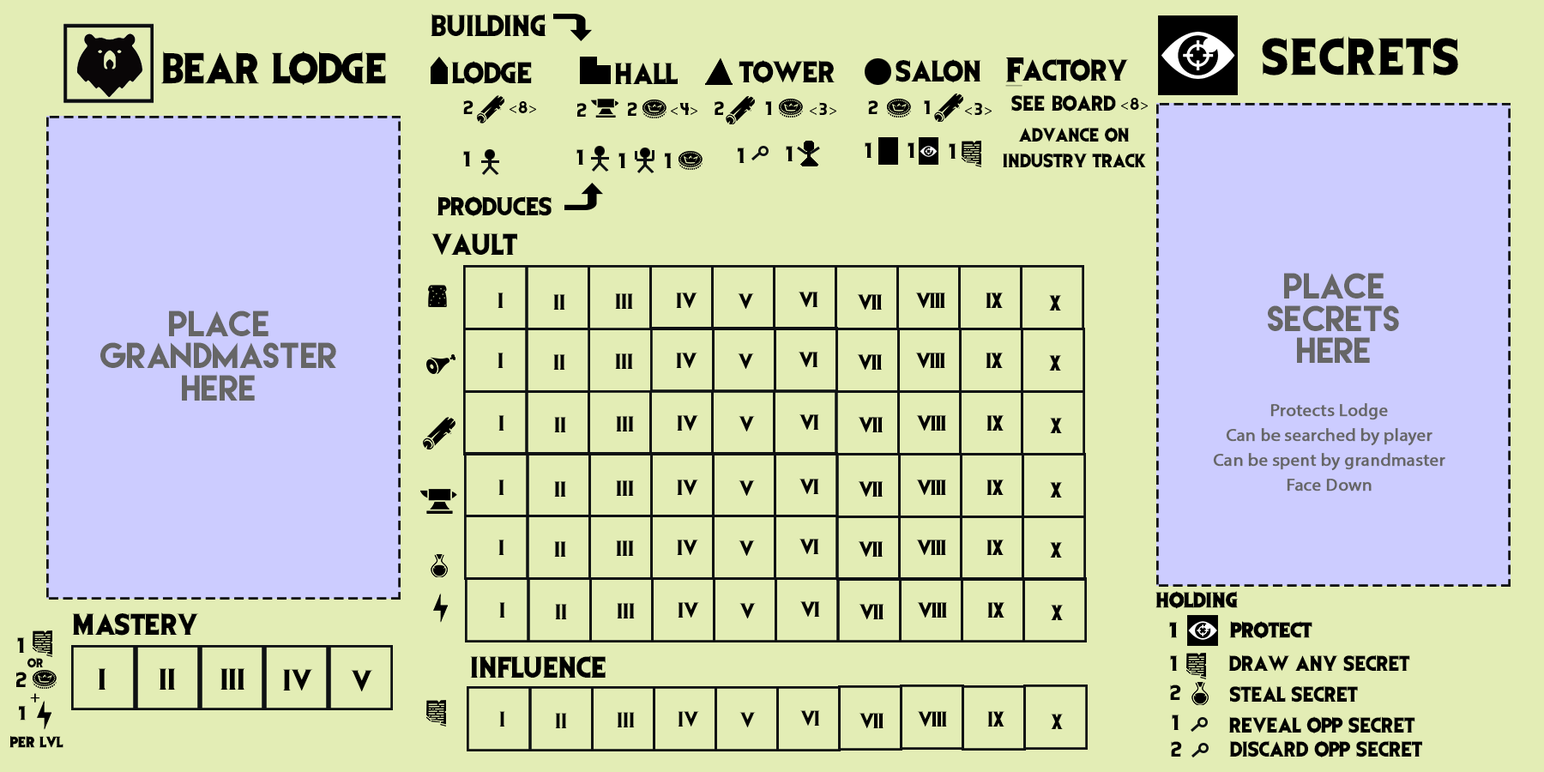
<style>
.page{position:relative;width:1544px;height:772px;background:#e3edb5}
.page>*{position:absolute;margin:0}
.t1{font:25px "EvilDead";color:#000000}
.t2{font:42.9px "EvilDead";letter-spacing:0.05em;color:#000000}
.t3{font:35.7px "EvilDead";color:#000000}
.t4{font:28.6px "EvilDead";color:#000000;font-weight:bold;text-decoration:underline}
.t5{font:16.1px "EvilDead";color:#000000}
.t6{font:14.3px "MyriadPro-Regular";color:#000000}
.t7{font:14.3px "EvilDead";color:#000000}
.t8{font:17.9px "EvilDead";color:#000000}
.t9{font:16.1px/25px "EvilDead";color:#000000}
.t10{font:21.4px "EvilDead";color:#000000}
.t11{font:32.2px/32.2px "LemonMilk";color:#666666}
.t12{font:17.9px/25px "MyriadPro-Regular";color:#666666;font-weight:bold}
.t13{font:17.9px "EvilDead";color:#000000;font-weight:bold}
.t14{font:10.7px "EvilDead";color:#000000}
.t15{font:16.1px "MyriadPro-Regular";color:#000000;font-weight:bold}
.t16{font:16.1px "EvilDead";color:#000000;font-weight:bold}
.t17{font:17.9px "EvilDead";letter-spacing:-0.05em;color:#000000}
.t18{font:12.5px "EvilDead";color:#000000;font-weight:bold}
</style>
<div class="page">
<p class="t1" style="left:431px;top:14px;width:116px;height:22px">BUILDING</p>
<p class="t2" style="left:1262px;top:36px;width:197px;height:39px">SECRETS</p>
<p class="t3" style="left:161px;top:51px;width:225px;height:34px">BEAR LODGE</p>
<p class="t1" style="left:451px;top:61px;width:81px;height:24px">LODGE</p>
<p class="t1" style="left:614px;top:63px;width:64px;height:21px">HALL</p>
<p class="t1" style="left:739px;top:60px;width:97px;height:24px">Tower</p>
<p class="t1" style="left:896px;top:59px;width:85px;height:24px">SALON</p>
<p class="t4" style="left:1006px;top:57px;width:18px;height:30px">F</p>
<p class="t1" style="left:1022px;top:58px;width:107px;height:24px">ACTORY</p>
<p class="t5" style="left:463px;top:100px;width:11px;height:14px">2</p>
<p class="t6" style="left:510px;top:101px;width:26px;height:12px">&lt;<span class="t7">8</span>&gt;</p>
<p class="t5" style="left:715px;top:101px;width:9px;height:14px">2</p>
<p class="t5" style="left:765px;top:101px;width:7px;height:14px">1</p>
<p class="t5" style="left:868px;top:100px;width:11px;height:14px">2</p>
<p class="t5" style="left:924px;top:100px;width:7px;height:14px">1</p>
<p class="t8" style="left:1012px;top:94px;width:104px;height:18px">SEE BOARD</p>
<p class="t6" style="left:1121px;top:98px;width:27px;height:12px">&lt;<span class="t7">8</span>&gt;</p>
<p class="t5" style="left:577px;top:103px;width:10px;height:14px">2</p>
<p class="t5" style="left:628px;top:102px;width:9px;height:14px">2</p>
<p class="t6" style="left:671px;top:103px;width:27px;height:12px">&lt;<span class="t7">4</span>&gt;</p>
<p class="t6" style="left:810px;top:102px;width:26px;height:13px">&lt;<span class="t7">3</span>&gt;</p>
<p class="t6" style="left:965px;top:102px;width:27px;height:13px">&lt;<span class="t7">3</span>&gt;</p>
<p class="t9" style="left:1003px;top:127px;width:143px;height:41px;text-align:center">AdVANCE ON<br>INDUSTRY TRACK</p>
<p class="t8" style="left:577px;top:149px;width:7px;height:16px">1</p>
<p class="t8" style="left:738px;top:148px;width:7px;height:15px">1</p>
<p class="t8" style="left:786px;top:146px;width:8px;height:15px">1</p>
<p class="t8" style="left:865px;top:142px;width:8px;height:16px">1</p>
<p class="t8" style="left:908px;top:142px;width:7px;height:16px">1</p>
<p class="t8" style="left:949px;top:143px;width:8px;height:16px">1</p>
<p class="t8" style="left:463px;top:151px;width:8px;height:15px">1</p>
<p class="t8" style="left:619px;top:153px;width:7px;height:15px">1</p>
<p class="t8" style="left:665px;top:153px;width:7px;height:15px">1</p>
<p class="t10" style="left:437px;top:196px;width:115px;height:21px">PRODUCES</p>
<p class="t1" style="left:431px;top:233px;width:86px;height:22px">VAULT</p>
<p class="t11" style="left:1268px;top:273px;width:131px;height:90px;text-align:center">PLACE<br>SECRETS<br>HERE</p>
<p class="t11" style="left:100px;top:311px;width:236px;height:90px;text-align:center">PLACE<br>GRANDMASTER<br>HERE</p>
<p class="t12" style="left:1213px;top:403px;width:233px;height:89px;text-align:center">Protects Lodge<br>Can be searched by player<br>Can be spent by grandmaster<br>Face Down</p>
<p class="t13" style="left:1156px;top:591px;width:82px;height:18px">HOLDING</p>
<p class="t1" style="left:72px;top:613px;width:127px;height:23px">MASTERY</p>
<p class="t13" style="left:1169px;top:622px;width:8px;height:16px">1</p>
<p class="t13" style="left:1229px;top:621px;width:84px;height:18px">PROTECT</p>
<p class="t8" style="left:17px;top:637px;width:8px;height:16px">1</p>
<p class="t14" style="left:27px;top:657px;width:17px;height:11px">or</p>
<p class="t1" style="left:470px;top:655px;width:136px;height:23px">INFLUENCE</p>
<p class="t8" style="left:1170px;top:655px;width:8px;height:16px">1</p>
<p class="t8" style="left:1229px;top:655px;width:181px;height:17px">DRAW ANY SECRET</p>
<p class="t8" style="left:16px;top:672px;width:11px;height:15px">2</p>
<p class="t1" style="left:98px;top:668px;width:8px;height:22px">I</p>
<p class="t1" style="left:159px;top:668px;width:17px;height:22px">II</p>
<p class="t1" style="left:220px;top:668px;width:25px;height:22px">III</p>
<p class="t1" style="left:283px;top:669px;width:30px;height:22px">IV</p>
<p class="t1" style="left:351px;top:670px;width:22px;height:22px">V</p>
<p class="t8" style="left:1170px;top:685px;width:11px;height:15px">2</p>
<p class="t8" style="left:1229px;top:685px;width:129px;height:18px">STEAL SECRET</p>
<p class="t15" style="left:30px;top:693px;width:9px;height:10px">+</p>
<p class="t16" style="left:19px;top:706px;width:7px;height:15px">1</p>
<p class="t8" style="left:499px;top:711px;width:6px;height:16px">I</p>
<p class="t8" style="left:555px;top:713px;width:12px;height:15px">II</p>
<p class="t8" style="left:617px;top:712px;width:18px;height:16px">III</p>
<p class="t8" style="left:678px;top:711px;width:21px;height:16px">IV</p>
<p class="t8" style="left:740px;top:712px;width:16px;height:16px">V</p>
<p class="t17" style="left:800px;top:710px;width:20px;height:16px">VI</p>
<p class="t17" style="left:859px;top:713px;width:25px;height:15px">VII</p>
<p class="t17" style="left:917px;top:711px;width:30px;height:16px">VIII</p>
<p class="t17" style="left:987px;top:711px;width:18px;height:16px">IX</p>
<p class="t17" style="left:1051px;top:714px;width:12px;height:15px">X</p>
<p class="t8" style="left:1172px;top:715px;width:8px;height:15px">1</p>
<p class="t8" style="left:1229px;top:716px;width:187px;height:18px">REVEAL OPP SECRET</p>
<p class="t18" style="left:9px;top:736px;width:54px;height:12px">PER LVL</p>
<p class="t8" style="left:1171px;top:741px;width:11px;height:16px">2</p>
<p class="t8" style="left:1229px;top:740px;width:193px;height:18px">DISCARD OPP SECRET</p>
</div>
